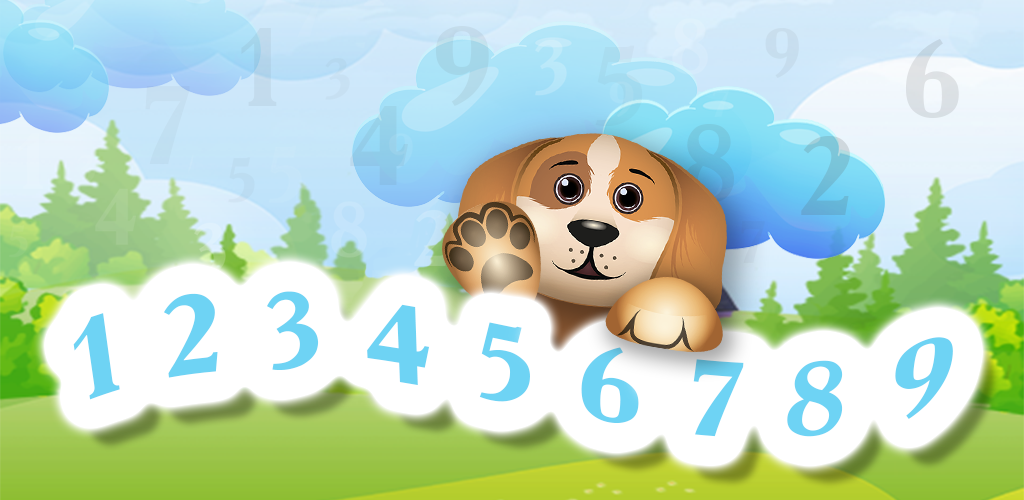
<style>
.page{position:relative;width:1024px;height:500px}
.page>*{position:absolute;margin:0}
.t1{font:108.8px "Academy-Bold";color:#6ed3f4;scale:1.1 1}
</style>
<div class="page">
<p class="t1" style="left:73px;top:291px;width:880px;height:146px">1 2 3 4 5 6 7 8 9</p>
</div>
